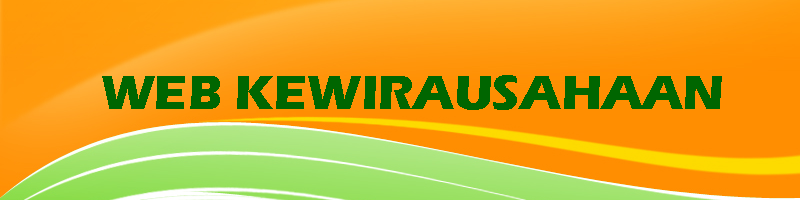
<style>
.page{position:relative;width:800px;height:200px}
.page>*{position:absolute;margin:0}
.t1{font:50px "ErasITC-Bold";color:#006600}
</style>
<div class="page">
<p class="t1" style="left:102px;top:75px;width:620px;height:35px">WEB KEWIRAUSAHAAN</p>
</div>
